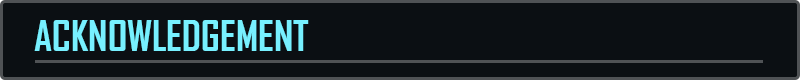
<style>
.page{position:relative;width:800px;height:80px;background:#0b0f13}
.page>*{position:absolute;margin:0}
.t1{font:40px "AgencyFB-Bold";color:#77f0ff}
</style>
<div class="page">
<p class="t1" style="left:34px;top:20px;width:275px;height:31px">ACKNOWLEDGEMENT</p>
</div>
